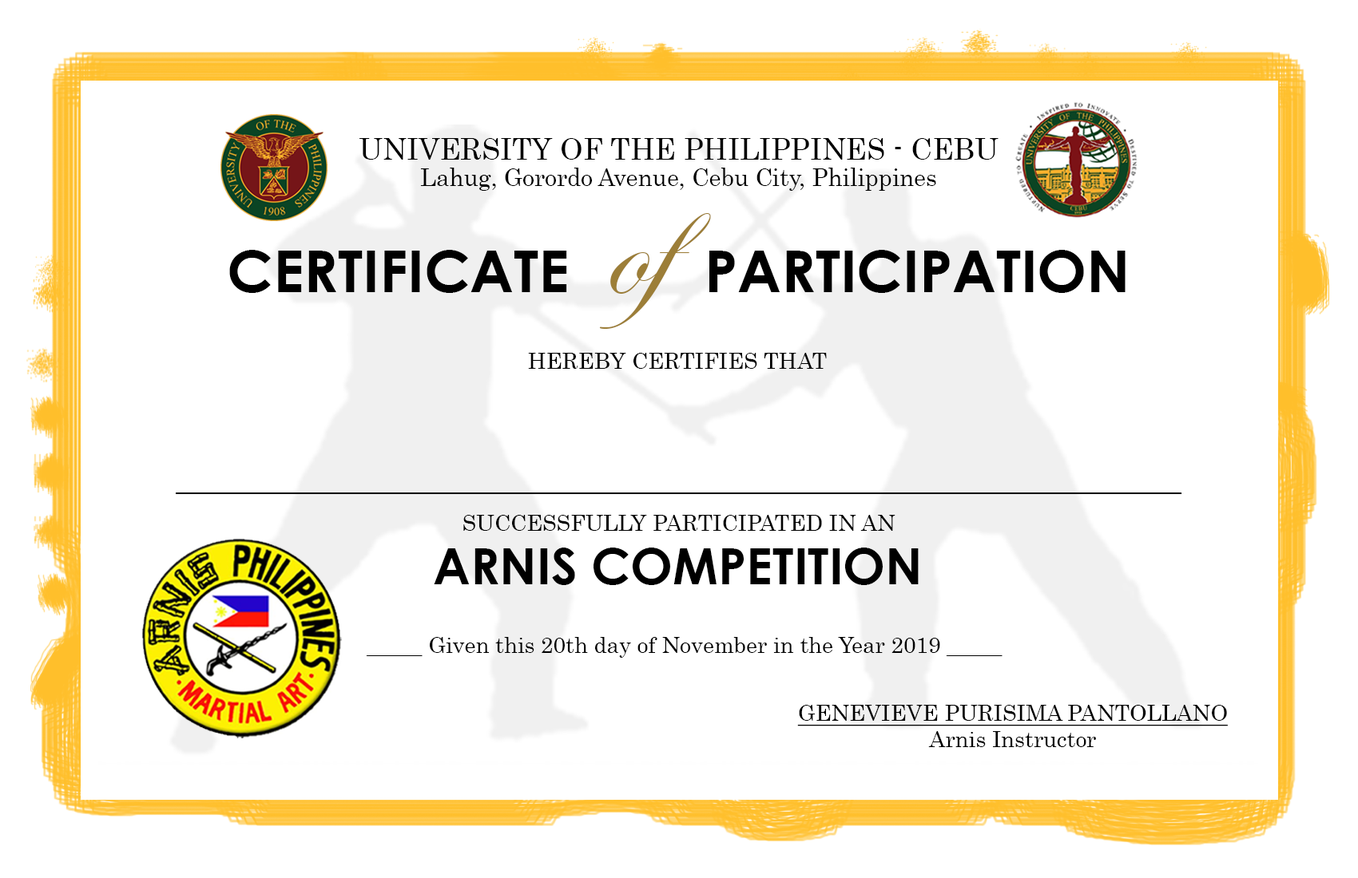
<style>
.page{position:relative;width:1358px;height:878px;background:#ffffff}
.page>*{position:absolute;margin:0}
.t1{font:30.1px "Century";color:#000000}
.t2{font:24.4px "Century";color:#000000}
.t3{font:58.6px "CenturyGothic-Bold";color:#000000}
.t4{font:151.3px "EdwardianScriptITC";color:#9c7e38}
.t5{font:22.2px "Century";color:#000000}
.t6{font:50.4px "CenturyGothic-Bold";color:#000000}
.t7{font:22.2px "Century";color:#000000;text-decoration:underline}
</style>
<div class="page">
<p class="t1" style="left:359px;top:138px;width:639px;height:22px">UNIVERSITY OF THE PHILIPPINES - CEBU</p>
<p class="t2" style="left:420px;top:168px;width:516px;height:23px">Lahug, Gorordo Avenue, Cebu City, Philippines</p>
<p class="t3" style="left:229px;top:213px;width:896px;height:116px">CERTIFICATE  <span class="t4">of </span>PARTICIPATION</p>
<p class="t5" style="left:528px;top:353px;width:298px;height:16px">HEREBY CERTIFIES THAT</p>
<p class="t5" style="left:463px;top:515px;width:432px;height:16px">SUCCESSFULLY PARTICIPATED IN AN</p>
<p class="t6" style="left:434px;top:548px;width:484px;height:37px">ARNIS COMPETITION</p>
<p class="t5" style="left:366px;top:637px;width:636px;height:21px">_____ Given this 20th day of November in the Year 2019 _____</p>
<p class="t7" style="left:797px;top:705px;width:430px;height:42px;text-align:center">GENEVIEVE PURISIMA PANTOLLANO<br><span class="t5">Arnis Instructor</span></p>
</div>
